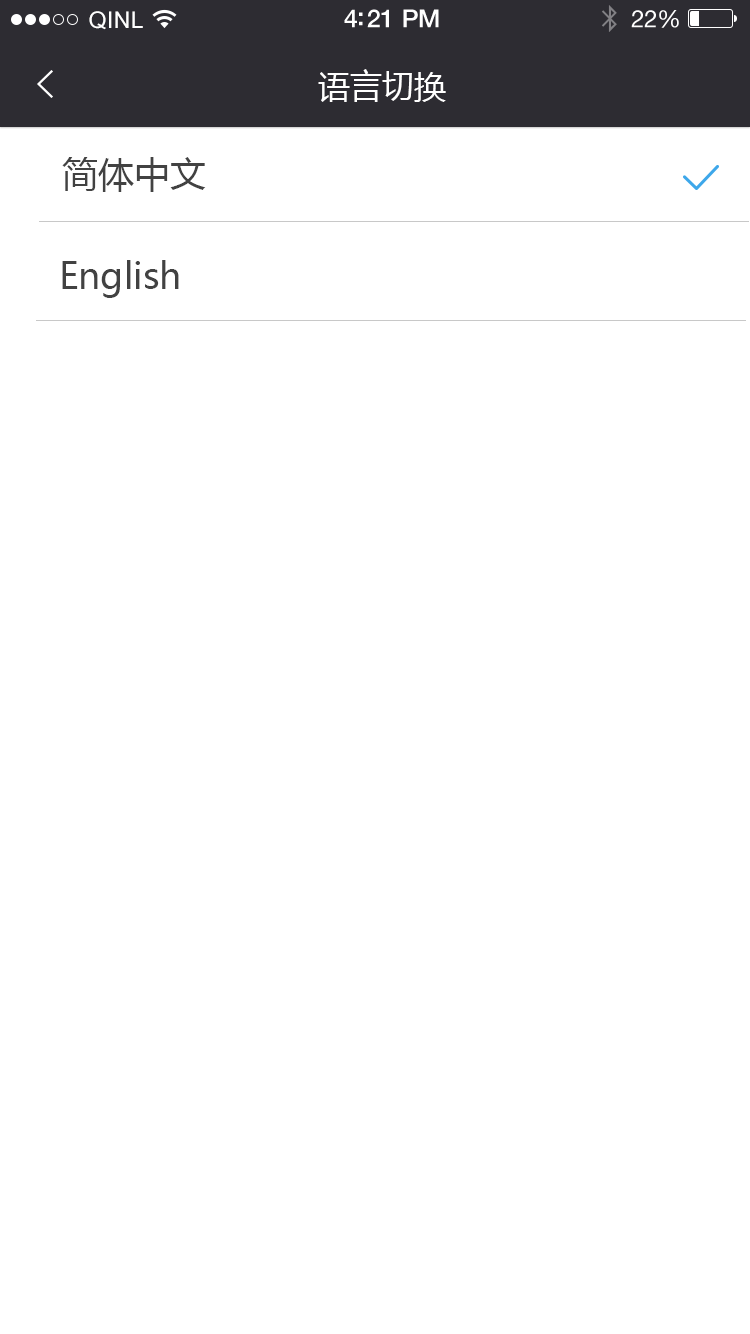
<style>
.page{position:relative;width:750px;height:1334px;background:#ffffff}
.page>*{position:absolute;margin:0}
.t1{font:23px "ArialUnicodeMS";letter-spacing:0.02em;color:#ffffff}
.t2{font:25px "HelveticaNeue-Medium";letter-spacing:-0.02em;color:#ffffff}
.t3{font:24px "HelveticaNeue";letter-spacing:-0.02em;color:#ffffff}
.t4{font:32px "MicrosoftYaHei";color:#ffffff}
.t5{font:36px "MicrosoftYaHei";color:#424242}
</style>
<div class="page">
<p class="t1" style="left:89px;top:11px;width:54px;height:19px">QINL</p>
<p class="t2" style="left:344px;top:9px;width:95px;height:19px">4:21 PM</p>
<p class="t3" style="left:631px;top:10px;width:48px;height:18px">22%</p>
<p class="t4" style="left:318px;top:69px;width:128px;height:33px">语言切换</p>
<p class="t5" style="left:62px;top:157px;width:144px;height:35px">简体中文</p>
<p class="t5" style="left:62px;top:260px;width:117px;height:38px">English</p>
</div>
